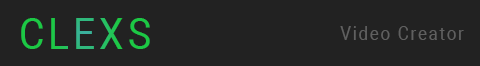
<style>
.page{position:relative;width:480px;height:66px;background:#222222}
.page>*{position:absolute;margin:0}
.t1{font:42.9px "Roboto-Regular";letter-spacing:0.1em;scale:0.91 1}
.t2{font:18.7px "Roboto-Regular";letter-spacing:0.1em;color:#606060;scale:0.91 1}
</style>
<div class="page">
<p class="t1" style="left:21px;top:18px;width:129px;height:31px">CLEXS</p>
<p class="t2" style="left:340px;top:26px;width:124px;height:14px">Video Creator</p>
</div>
